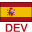
<style>
.page{position:relative;width:32px;height:32px;background:#ffffff}
.page>*{position:absolute;margin:0}
.t1{font:11px "Helvetica";color:#aa151b}
</style>
<div class="page">
<p class="t1" style="left:5px;top:23px;width:23px;height:9px">DEV</p>
</div>
